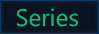
<style>
.page{position:relative;width:99px;height:34px;background:#0a1421}
.page>*{position:absolute;margin:0}
.t1{font:24px "SegoeUISymbol";color:#19b579}
</style>
<div class="page">
<p class="t1" style="left:16px;top:8px;width:63px;height:19px">Series</p>
</div>
